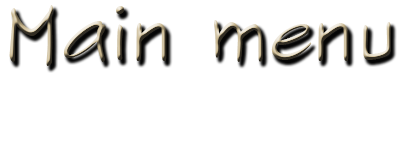
<style>
.page{position:relative;width:400px;height:150px;background:#ffffff}
.page>*{position:absolute;margin:0}
.t1{font:75px "SketchFlowPrint"}
</style>
<div class="page">
<p class="t1" style="left:9px;top:5px;width:382px;height:61px">Main menu</p>
</div>
